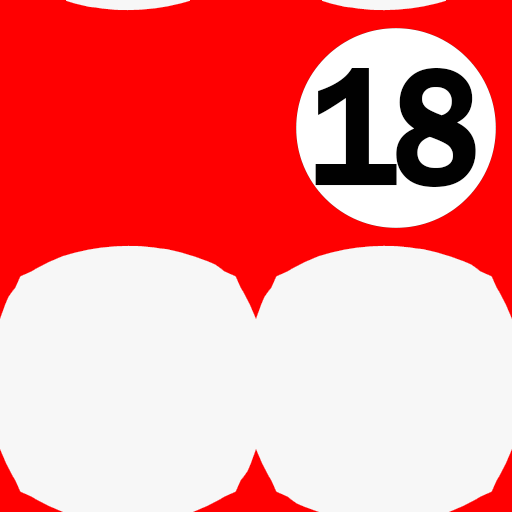
<style>
.page{position:relative;width:512px;height:512px;background:#f7f7f7}
.page>*{position:absolute;margin:0}
.t1{font:172.5px "FranklinGothic-Demi";letter-spacing:-0.05em;color:#010101;scale:0.87 1}
</style>
<div class="page">
<p class="t1" style="left:315px;top:68px;width:161px;height:119px">18</p>
</div>
